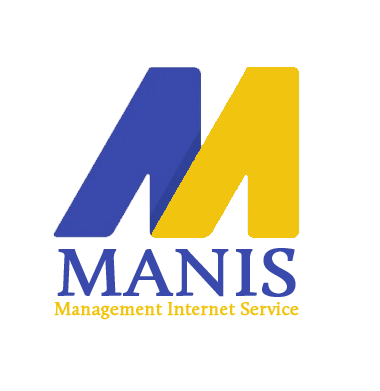
<style>
.page{position:relative;width:380px;height:391px;background:#ffffff}
.page>*{position:absolute;margin:0}
.t1{font:68.2px "Calluna-Regular";color:#3949ac;font-weight:bold;scale:1.1 1}
.t2{font:19.4px "Calluna-Regular";color:#f1c40f;font-weight:bold;scale:0.96 1}
</style>
<div class="page">
<p class="t1" style="left:57px;top:248px;width:239px;height:49px">MANIS</p>
<p class="t2" style="left:54px;top:302px;width:245px;height:18px">Management Internet Service</p>
</div>
